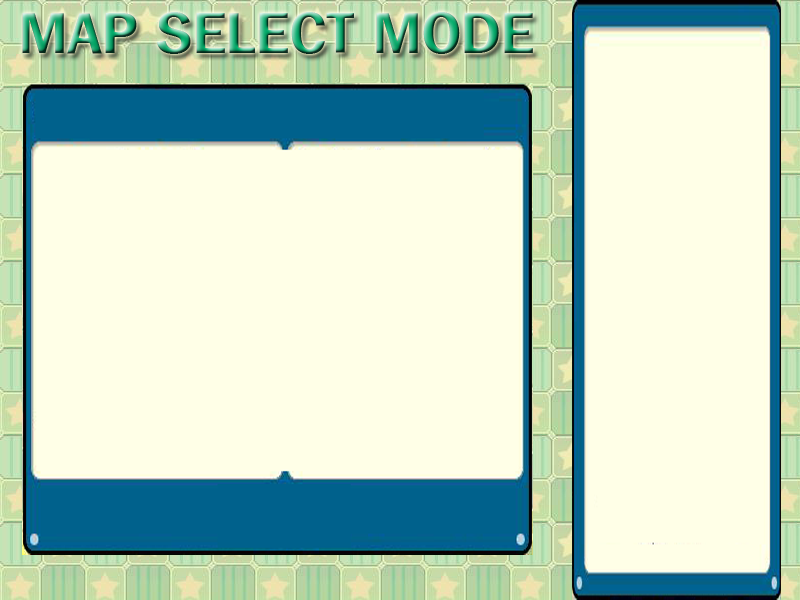
<style>
.page{position:relative;width:800px;height:600px;background:#ffffe7}
.page>*{position:absolute;margin:0}
.t1{font:54.9px "HYsupB"}
</style>
<div class="page">
<p class="t1" style="left:22px;top:12px;width:511px;height:42px">MAP SELECT MODE</p>
</div>
